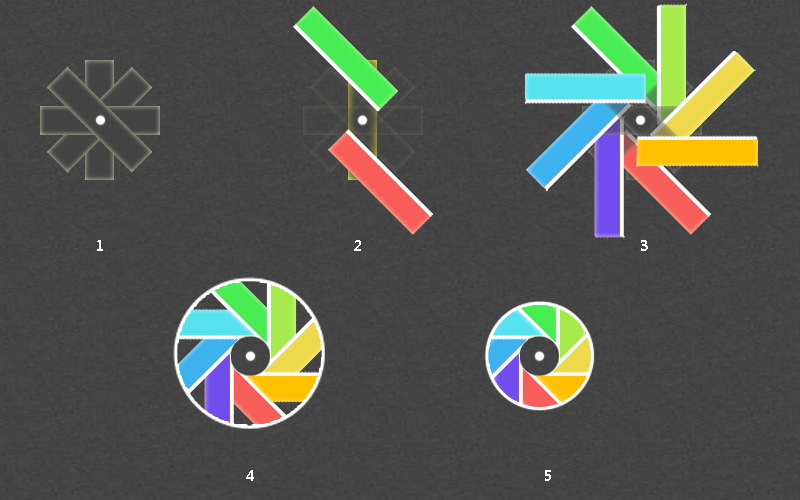
<style>
.page{position:relative;width:800px;height:500px}
.page>*{position:absolute;margin:0}
.t1{font:14px "MicrosoftYaHei-Bold";letter-spacing:0.04em;color:#ffffff}
</style>
<div class="page">
<p class="t1" style="left:97px;top:240px;width:6px;height:11px">1</p>
<p class="t1" style="left:354px;top:240px;width:7px;height:11px">2</p>
<p class="t1" style="left:641px;top:240px;width:7px;height:11px">3</p>
<p class="t1" style="left:246px;top:470px;width:8px;height:11px">4</p>
<p class="t1" style="left:545px;top:470px;width:6px;height:11px">5</p>
</div>
